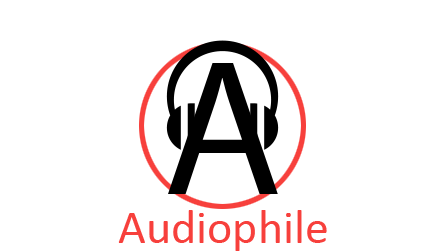
<style>
.page{position:relative;width:445px;height:251px;background:#ffffff}
.page>*{position:absolute;margin:0}
.t1{font:48px "Calibri";color:#f7403c}
</style>
<div class="page">
<p class="t1" style="left:118px;top:210px;width:209px;height:41px">Audiophile</p>
</div>
